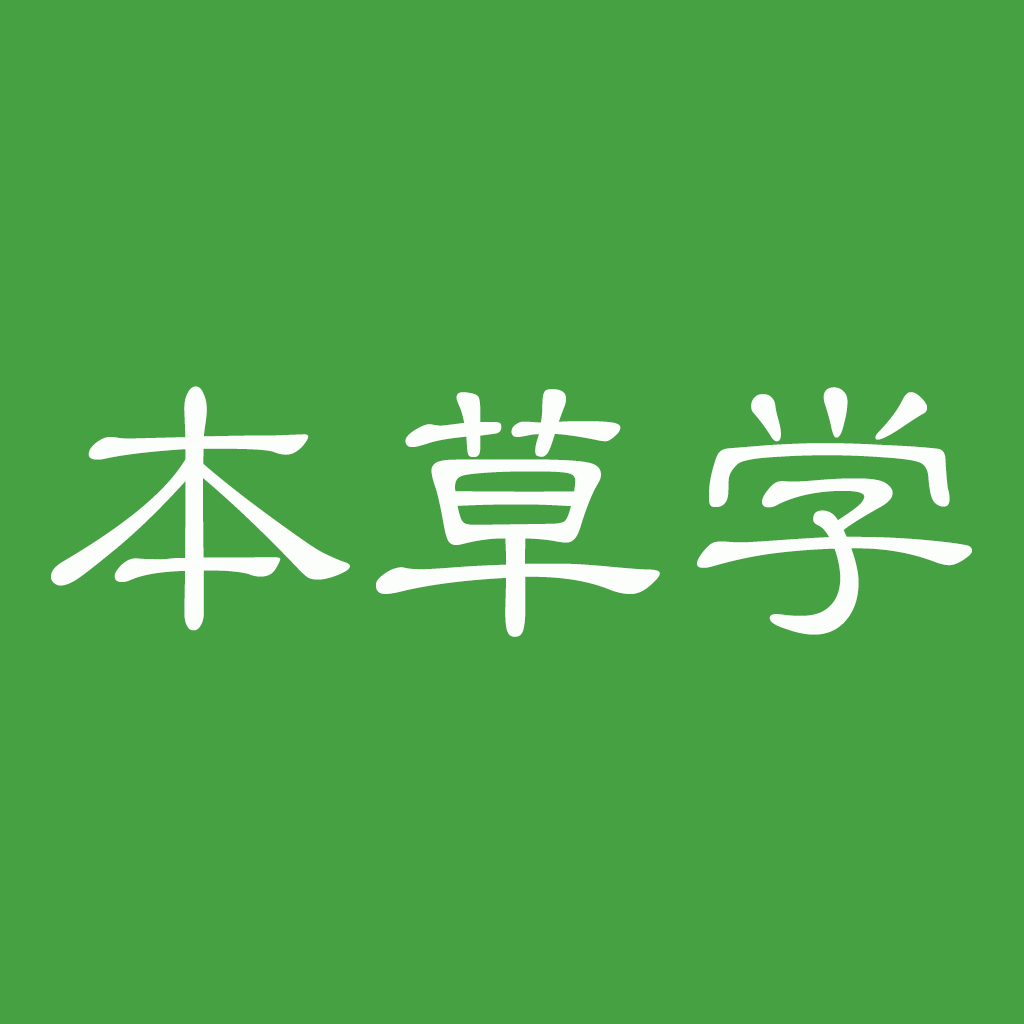
<style>
.page{position:relative;width:1024px;height:1024px;background:#45a142}
.page>*{position:absolute;margin:0}
.t1{font:350px "STLibian-SC-Regular";letter-spacing:-0.1em;color:#fbfefb}
</style>
<div class="page">
<p class="t1" style="left:51px;top:386px;width:921px;height:251px">本草学</p>
</div>
